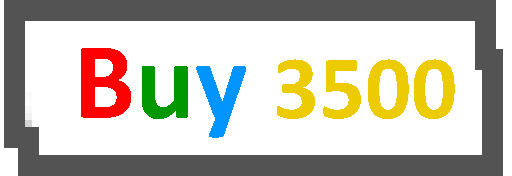
<style>
.page{position:relative;width:512px;height:176px;background:#ffffff}
.page>*{position:absolute;margin:0}
.t1{font:90.7px "Calibri-Bold";color:#eccc00}
.t2{font:110.7px "Calibri-Bold";color:#ff0000}
.t3{font:110.7px "Calibri-Bold";color:#009700}
.t4{font:110.7px "Calibri-Bold";color:#0094ff}
</style>
<div class="page">
<p class="t1" style="left:81px;top:48px;width:374px;height:90px"><span class="t2">B</span><span class="t3">u</span><span class="t4">y </span>3500</p>
</div>
